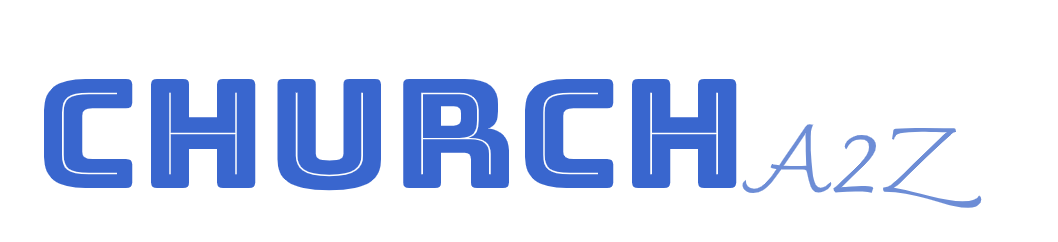
<style>
.page{position:relative;width:1058px;height:242px;background:#ffffff}
.page>*{position:absolute;margin:0}
.t1{font:151.2px "Bungee-Inline";color:#3966ce;scale:1.11 1}
.t2{font:91.5px "Charmonman-Regular";color:#6d8dd6;scale:1.12 1}
</style>
<div class="page">
<p class="t1" style="left:44px;top:79px;width:693px;height:112px">CHURCH</p>
<p class="t2" style="left:742px;top:124px;width:240px;height:84px">A2Z</p>
</div>
